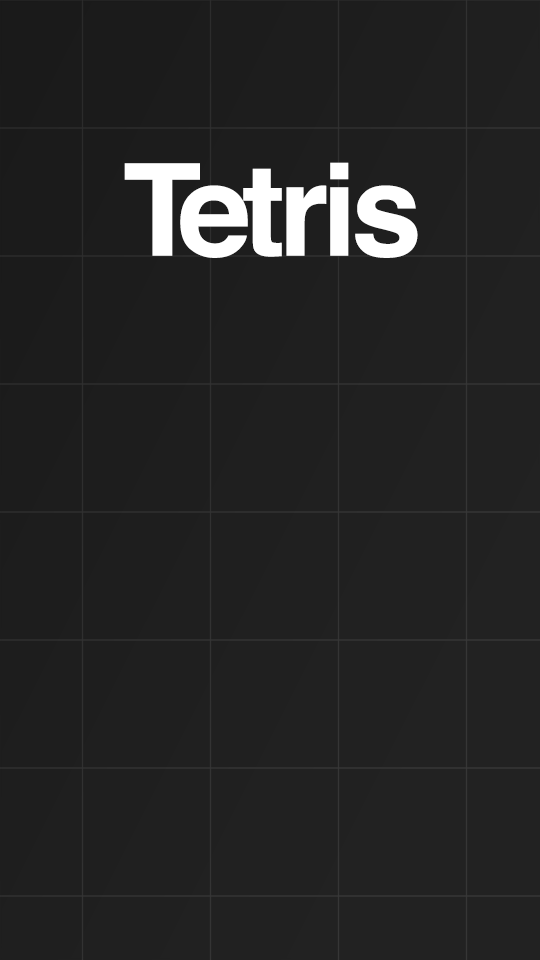
<style>
.page{position:relative;width:540px;height:960px}
.page>*{position:absolute;margin:0}
.t1{font:128px "Helvetica-Bold";letter-spacing:-0.05em;color:#ffffff}
.t2{font:128px "Helvetica-Bold";letter-spacing:-0.109em;color:#ffffff}
</style>
<div class="page">
<p class="t1" style="left:124px;top:162px;width:294px;height:96px"><span class="t2">T</span>etris</p>
</div>
